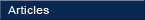
<style>
.page{position:relative;width:145px;height:20px;background:#092750}
.page>*{position:absolute;margin:0}
.t1{font:11.4px "ArialMT";letter-spacing:0.04em;color:#f2f2f2}
</style>
<div class="page">
<p class="t1" style="left:8px;top:6px;width:41px;height:8px">Articles</p>
</div>
